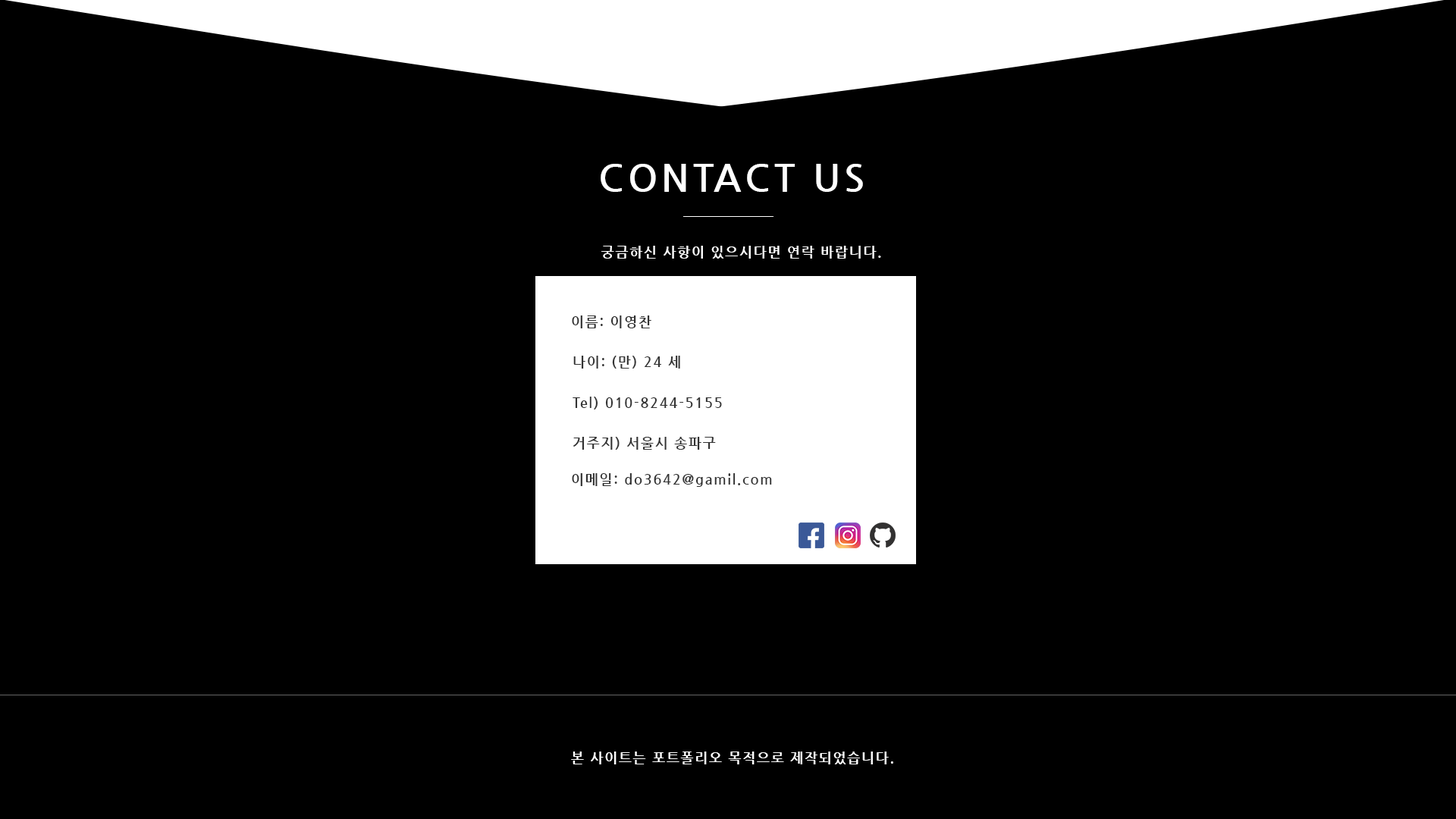
<style>
.page{position:relative;width:1456px;height:819px;background:#000000}
.page>*{position:absolute;margin:0}
.t1{font:37.9px "NanumGothicBold";letter-spacing:0.1em;color:#ffffff}
.t2{font:13.6px "NanumGothicBold";letter-spacing:0.1em;color:#ffffff}
.t3{font:13.6px "NanumGothicBold";letter-spacing:0.1em;color:#333333}
</style>
<div class="page">
<p class="t1" style="left:601px;top:164px;width:262px;height:28px">CONTACT US</p>
<p class="t2" style="left:601px;top:246px;width:280px;height:13px">궁금하신 사항이 있으시다면 연락 바랍니다.</p>
<p class="t3" style="left:572px;top:315px;width:79px;height:13px">이름: 이영찬</p>
<p class="t3" style="left:573px;top:356px;width:107px;height:13px">나이: (만) 24 세</p>
<p class="t3" style="left:573px;top:397px;width:149px;height:12px">Tel) 010-8244-5155</p>
<p class="t3" style="left:573px;top:437px;width:143px;height:13px">거주지) 서울시 송파구</p>
<p class="t3" style="left:572px;top:473px;width:200px;height:14px">이메일: do3642@gamil.com</p>
<p class="t2" style="left:571px;top:751px;width:322px;height:13px">본 사이트는 포트폴리오 목적으로 제작되었습니다.</p>
</div>
